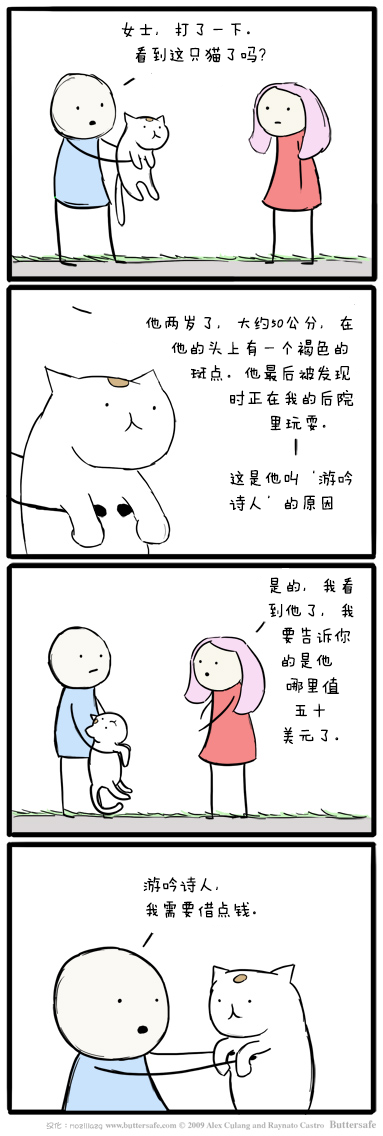
<style>
.page{position:relative;width:383px;height:1136px;background:#ffffff}
.page>*{position:absolute;margin:0}
.t1{font:18px/25px "FZMWJW--GB1-0";color:#000000}
.t2{font:8px "DFGirl";color:#b2b2b2}
</style>
<div class="page">
<p class="t1" style="left:121px;top:22px;width:145px;height:41px">女士，打了一下。<br>  看到这只猫了吗？</p>
<p class="t1" style="left:146px;top:315px;width:208px;height:116px">他两岁了，大约50公分，在<br>         他的头上有一个褐色的<br>            斑点。他最后被发现<br>                  时正在我的后院<br>                        里玩耍。</p>
<p class="t1" style="left:229px;top:470px;width:124px;height:41px">这是他叫‘游吟<br>   诗人’的原因</p>
<p class="t1" style="left:268px;top:577px;width:86px;height:167px">是的，我看<br>到他了，我<br>  要告诉你<br>  的是他<br>   哪里值<br>    五十<br>  美元了。</p>
<p class="t1" style="left:143px;top:876px;width:113px;height:42px">游吟诗人，<br>我需要借点钱。</p>
<p class="t2" style="left:46px;top:1122px;width:57px;height:8px">汉化：mozillazg</p>
</div>
